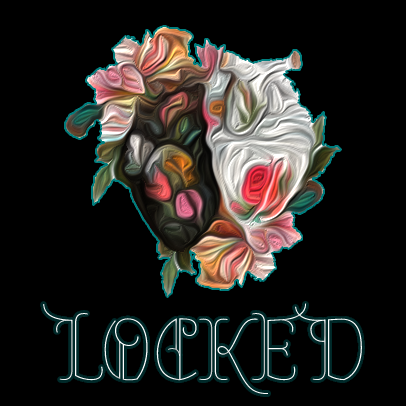
<style>
.page{position:relative;width:406px;height:406px;background:#000000}
.page>*{position:absolute;margin:0}
.t1{font:91.1px "AlmendraDisplay-Regular";color:#ffffff}
</style>
<div class="page">
<p class="t1" style="left:43px;top:303px;width:319px;height:91px">LOCKED</p>
</div>
